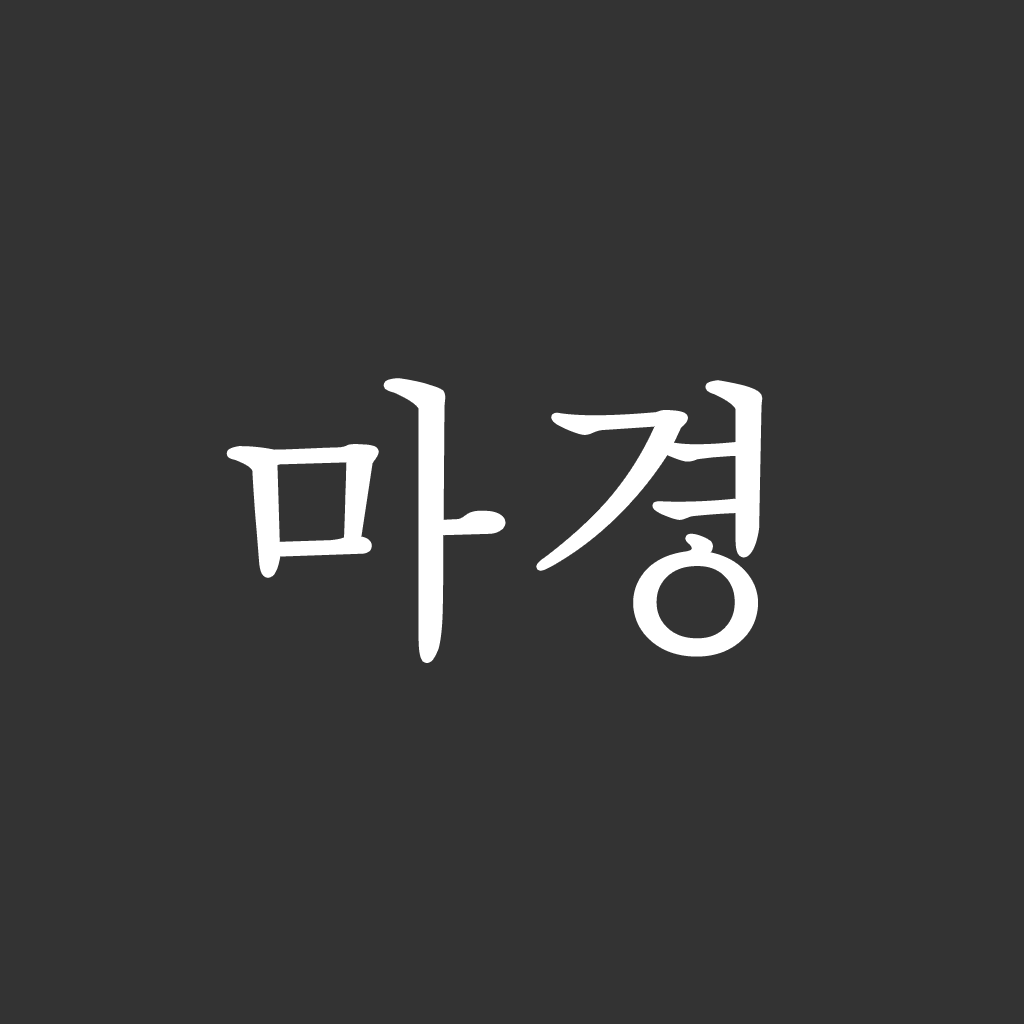
<style>
.page{position:relative;width:1024px;height:1024px;background:#333333}
.page>*{position:absolute;margin:0}
.t1{font:300px "Batang";color:#ffffff}
</style>
<div class="page">
<p class="t1" style="left:229px;top:381px;width:531px;height:279px">마경</p>
</div>
